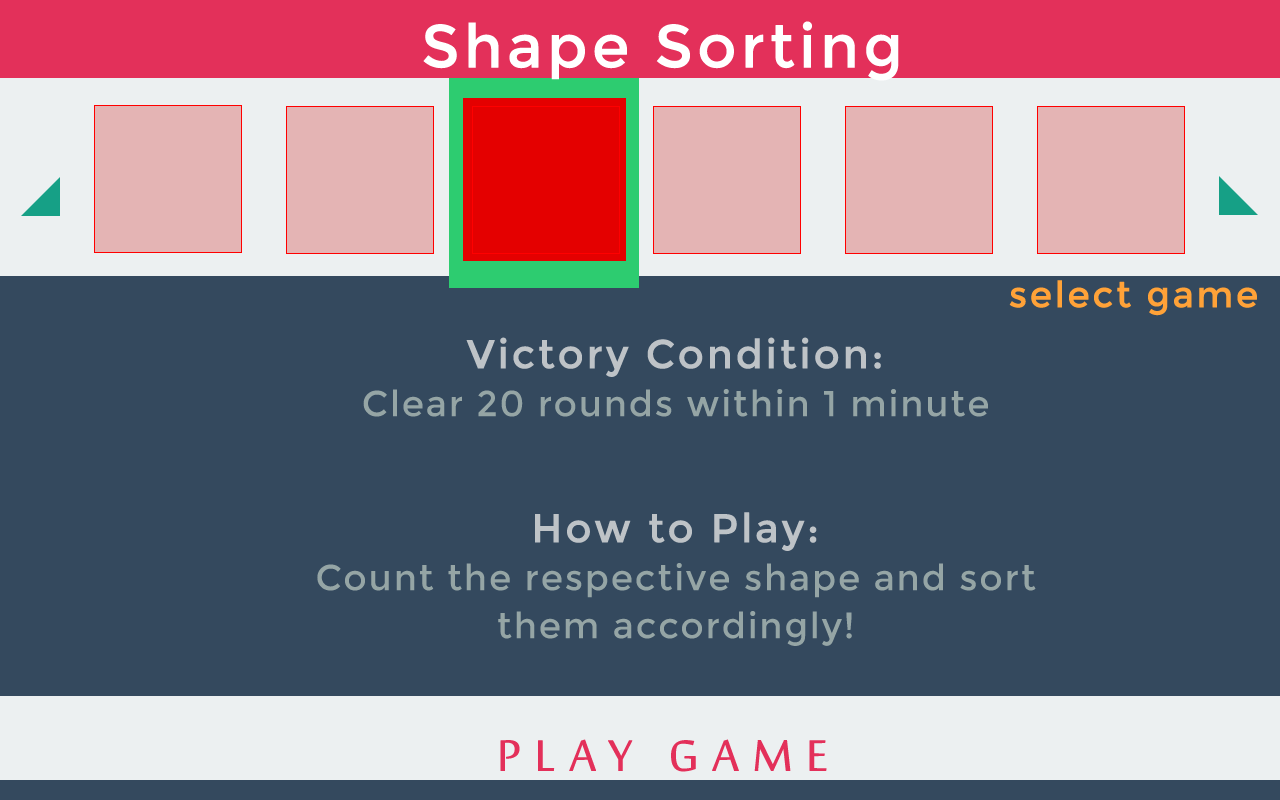
<style>
.page{position:relative;width:1280px;height:800px;background:#34495e}
.page>*{position:absolute;margin:0}
.t1{font:60px "Montserrat-Regular";letter-spacing:0.05em;color:#ffffff;font-weight:bold}
.t2{font:36px "Montserrat-Regular";letter-spacing:0.05em;color:#ffa238;font-weight:bold}
.t3{font:36px/48px "Montserrat-Regular";letter-spacing:0.05em;color:#95a5a5}
.t4{font:40px/48px "Montserrat-Regular";letter-spacing:0.05em;color:#bec3c7;font-weight:bold}
.t5{font:40px/63px "Montserrat-Regular";letter-spacing:0.05em;color:#bec3c7;font-weight:bold}
.t6{font:60px "SakkalMajalla";letter-spacing:0.2em;color:#e3305a;font-weight:bold}
</style>
<div class="page">
<p class="t1" style="left:423px;top:21px;width:476px;height:60px">Shape Sorting</p>
<p class="t2" style="left:1009px;top:280px;width:248px;height:36px">select game</p>
<p class="t3" style="left:317px;top:337px;width:719px;height:309px;text-align:center"><span class="t4">Victory Condition:<br></span>Clear 20 rounds within 1 minute<br><br><span class="t5">How to Play:<br></span>Count the respective shape and sort them accordingly!</p>
<p class="t6" style="left:500px;top:739px;width:327px;height:33px">PLAY GAME</p>
</div>
